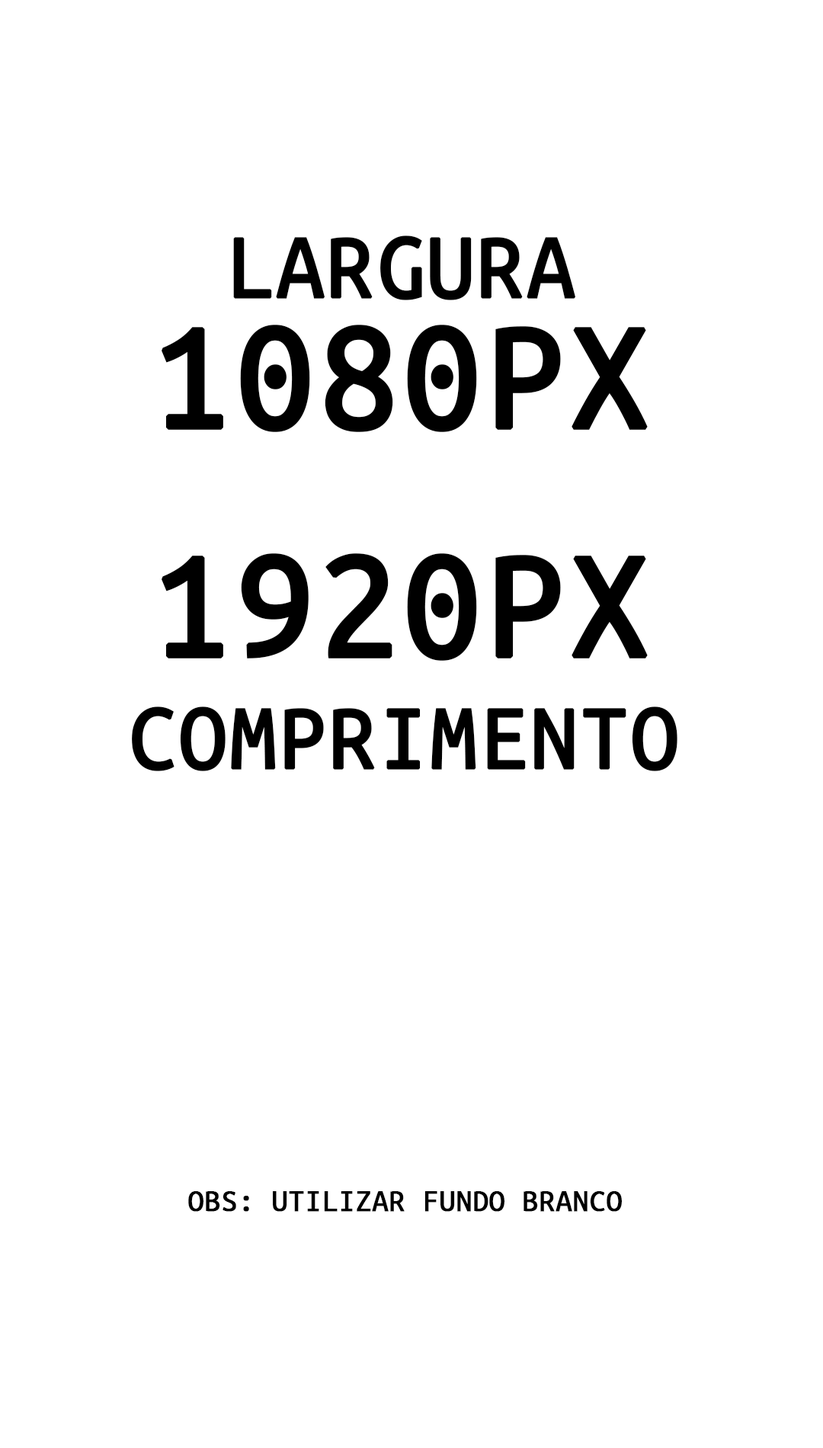
<style>
.page{position:relative;width:823px;height:1448px;background:#ffffff}
.page>*{position:absolute;margin:0}
.t1{font:95.3px "UbuntuMono-Regular";color:#000000;text-transform:uppercase;font-weight:bold}
.t2{font:158.8px/114.3px "UbuntuMono-Regular";color:#000000;text-transform:uppercase;font-weight:bold}
.t3{font:31.8px "UbuntuMono-Regular";color:#000000;text-transform:uppercase;font-weight:bold}
</style>
<div class="page">
<p class="t1" style="left:233px;top:236px;width:343px;height:64px">Largura</p>
<p class="t2" style="left:161px;top:325px;width:487px;height:336px">1080px<br><br>1920px</p>
<p class="t1" style="left:132px;top:707px;width:546px;height:64px">comprimento</p>
<p class="t3" style="left:188px;top:1191px;width:434px;height:21px">obs: utilizar fundo branco</p>
</div>
